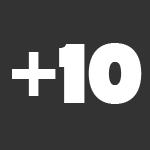
<style>
.page{position:relative;width:150px;height:150px;background:#333333}
.page>*{position:absolute;margin:0}
.t1{font:83.3px "StrenuousBl-Regular";color:#ffffff}
</style>
<div class="page">
<p class="t1" style="left:12px;top:43px;width:130px;height:61px">+10</p>
</div>
